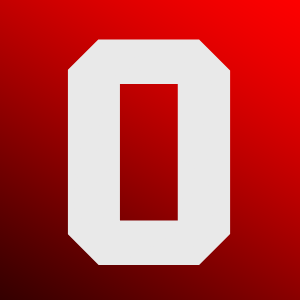
<style>
.page{position:relative;width:300px;height:300px;background:#e9e9e9}
.page>*{position:absolute;margin:0}
.t1{font:323.1px "Versa-Versa";color:#e9e9e9}
</style>
<div class="page">
<p class="t1" style="left:67px;top:39px;width:164px;height:227px">O</p>
</div>
